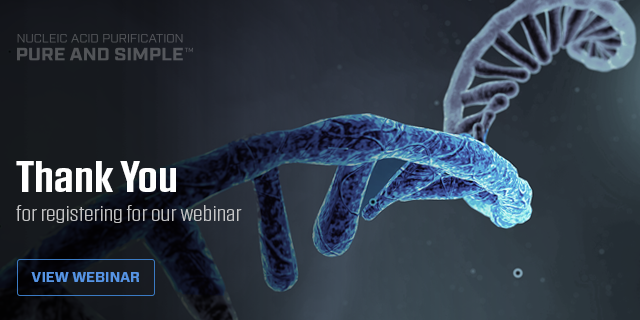
<style>
.page{position:relative;width:640px;height:320px}
.page>*{position:absolute;margin:0}
.t1{font:44px "Tungsten-Semibold";color:#ffffff;scale:1.31 1}
.t2{font:22px "Tungsten-Light";color:#c4c4c5;scale:1.35 1}
.t3{font:14.1px "Forza-Bold";letter-spacing:-0.01em;color:#5694e4;text-transform:uppercase}
</style>
<div class="page">
<p class="t1" style="left:16px;top:161px;width:160px;height:31px">Thank You</p>
<p class="t2" style="left:16px;top:205px;width:226px;height:18px">for registering for our webinar</p>
<p class="t3" style="left:31px;top:272px;width:108px;height:10px">View Webinar</p>
</div>
